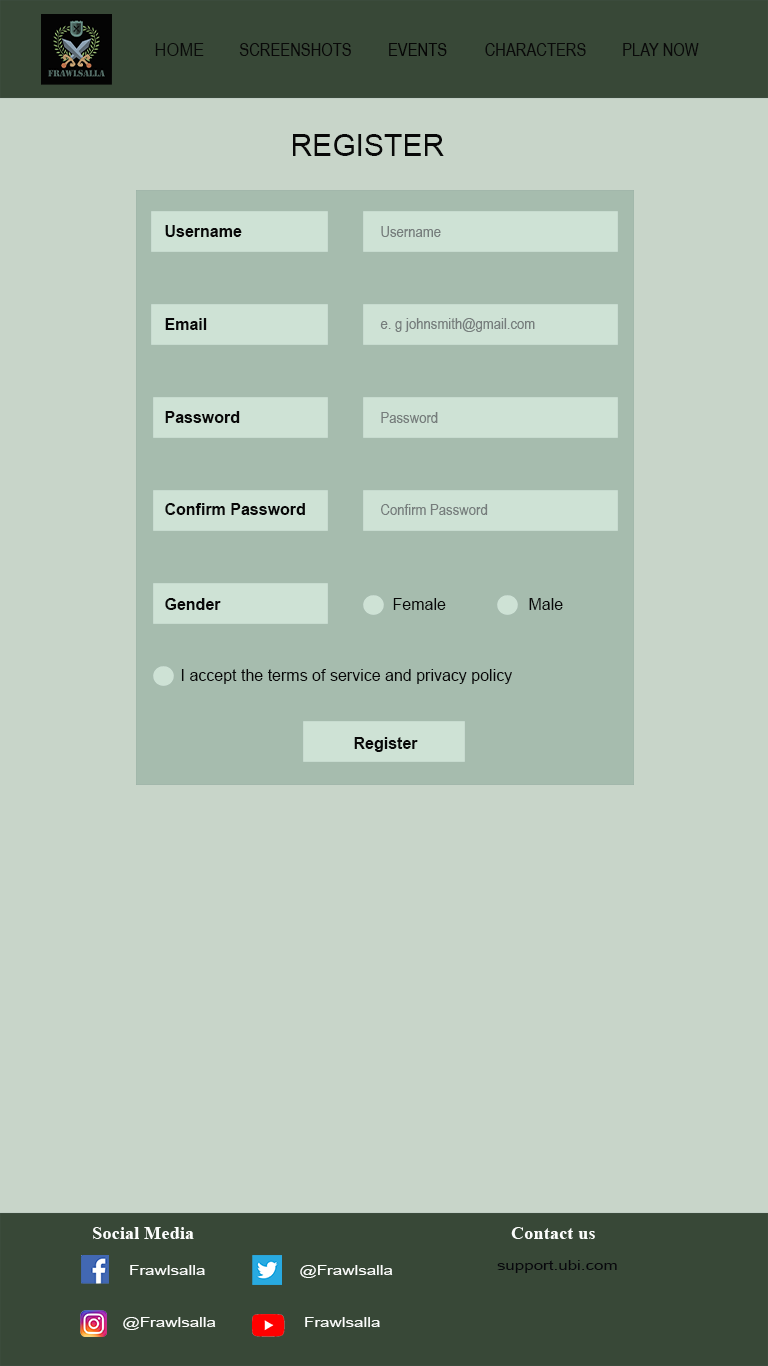
<style>
.page{position:relative;width:768px;height:1366px;background:#c8d5c9}
.page>*{position:absolute;margin:0}
.t1{font:18px "ArialNarrow";color:#0a0b0a;scale:1.13 1}
.t2{font:18px "ArialNarrow";color:#090909}
.t3{font:18px "ArialNarrow";color:#060606}
.t4{font:18px "ArialNarrow";color:#0a0a0a}
.t5{font:30px "ArialMT";color:#080808}
.t6{font:16px "Arial-BoldMT";color:#080808}
.t7{font:16px "ArialNarrow";color:#767d7c}
.t8{font:16px "ArialMT";color:#080808}
.t9{font:18.5px "TimesNewRomanPS-BoldMT";color:#fbfdfb}
.t10{font:14px "ArialMT";color:#fbfdfb;scale:1.21 1}
.t11{font:14px "ArialMT";color:#08080d;scale:1.21 1}
</style>
<div class="page">
<p class="t1" style="left:155px;top:43px;width:49px;height:13px">HOME</p>
<p class="t2" style="left:239px;top:43px;width:112px;height:13px">SCREENSHOTS</p>
<p class="t3" style="left:389px;top:43px;width:58px;height:13px">EVENTS</p>
<p class="t4" style="left:485px;top:43px;width:101px;height:13px">CHARACTERS</p>
<p class="t4" style="left:623px;top:43px;width:76px;height:13px">PLAY NOW</p>
<p class="t5" style="left:293px;top:134px;width:151px;height:22px">REGISTER</p>
<p class="t6" style="left:165px;top:225px;width:77px;height:12px">Username</p>
<p class="t7" style="left:381px;top:226px;width:60px;height:11px">Username</p>
<p class="t6" style="left:165px;top:318px;width:42px;height:12px">Email</p>
<p class="t7" style="left:380px;top:318px;width:155px;height:14px">e. g johnsmith@gmail.com</p>
<p class="t6" style="left:165px;top:411px;width:75px;height:12px">Password</p>
<p class="t7" style="left:381px;top:412px;width:57px;height:11px">Password</p>
<p class="t6" style="left:165px;top:503px;width:140px;height:12px">Confirm Password</p>
<p class="t7" style="left:381px;top:504px;width:107px;height:11px">Confirm Password</p>
<p class="t6" style="left:165px;top:598px;width:56px;height:12px">Gender</p>
<p class="t8" style="left:393px;top:598px;width:53px;height:12px">Female</p>
<p class="t8" style="left:529px;top:598px;width:34px;height:12px">Male</p>
<p class="t8" style="left:181px;top:669px;width:331px;height:15px">I accept the terms of service and privacy policy</p>
<p class="t6" style="left:354px;top:737px;width:64px;height:15px">Register</p>
<p class="t9" style="left:93px;top:1227px;width:101px;height:12px">Social Media</p>
<p class="t9" style="left:511px;top:1227px;width:84px;height:12px">Contact us</p>
<p class="t10" style="left:130px;top:1265px;width:75px;height:10px">Frawlsalla</p>
<p class="t10" style="left:300px;top:1265px;width:93px;height:13px">@Frawlsalla</p>
<p class="t11" style="left:497px;top:1260px;width:120px;height:13px">support.ubi.com</p>
<p class="t10" style="left:123px;top:1317px;width:93px;height:13px">@Frawlsalla</p>
<p class="t10" style="left:305px;top:1317px;width:75px;height:10px">Frawlsalla</p>
</div>
